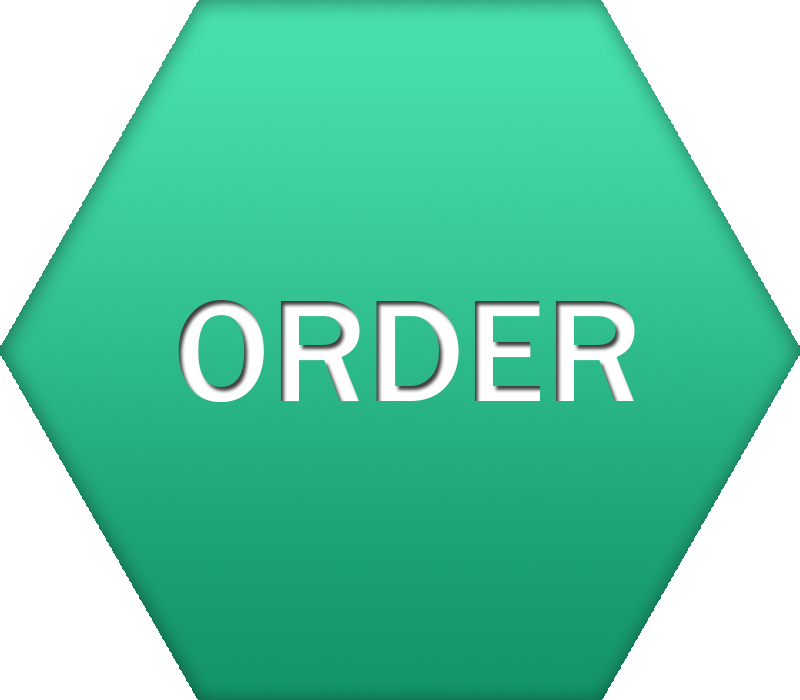
<style>
.page{position:relative;width:800px;height:700px;background:#ffffff}
.page>*{position:absolute;margin:0}
.t1{font:150px "FranklinGothic-Medium";color:#ffffff}
</style>
<div class="page">
<p class="t1" style="left:178px;top:300px;width:457px;height:102px">ORDER</p>
</div>
